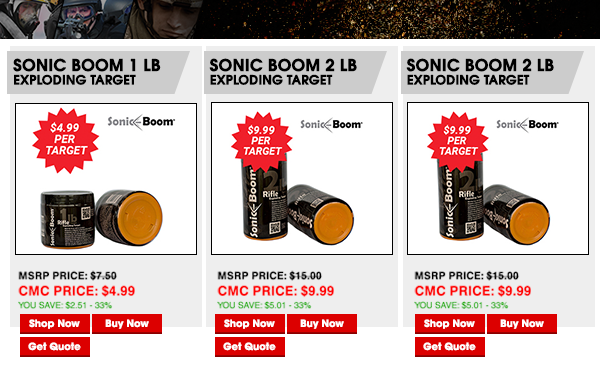
<style>
.page{position:relative;width:600px;height:367px;background:#ffffff}
.page>*{position:absolute;margin:0}
.t1{font:16.1px "AvantGardeCE-Demi";letter-spacing:0.005em;color:#000000;font-weight:bold}
.t2{font:12.6px "AvantGardeCE-Demi";letter-spacing:0.005em;color:#000000;font-weight:bold}
.t3{font:8.7px/12.7px "Helvetica";letter-spacing:0.005em;color:#19ae00}
.t4{font:10.6px "HelveticaGreek-Bold";letter-spacing:0.005em;color:#000000}
.t5{font:13.5px "HelveticaGreek-Bold";letter-spacing:0.005em;color:#ff0000}
.t6{font:13.5px/12.7px "HelveticaGreek-Bold";letter-spacing:0.005em;color:#ff0000}
.t7{font:9.8px "AvantGardeLT-Bold";color:#ffffff}
</style>
<div class="page">
<p class="t1" style="left:13px;top:58px;width:148px;height:14px">SONIC BOOM 1 LB</p>
<p class="t1" style="left:209px;top:58px;width:148px;height:14px">SONIC BOOM 2 LB</p>
<p class="t1" style="left:406px;top:58px;width:148px;height:14px">SONIC BOOM 2 LB</p>
<p class="t2" style="left:14px;top:74px;width:122px;height:11px">EXPLODING TARGET</p>
<p class="t2" style="left:210px;top:74px;width:123px;height:11px">EXPLODING TARGET</p>
<p class="t2" style="left:407px;top:74px;width:123px;height:11px">EXPLODING TARGET</p>
<p class="t3" style="left:18px;top:270px;width:117px;height:39px"><span class="t4">MSRP PRICE: $7.50<br></span><span class="t5">CMC PRICE: $4</span><span class="t6">.99<br></span>YOU SAVE: $2.51 - 33%</p>
<p class="t3" style="left:217px;top:270px;width:117px;height:39px"><span class="t4">MSRP PRICE: $15.00<br></span><span class="t5">CMC PRICE: </span><span class="t6">$9.99<br></span>YOU SAVE: $5.01 - 33%</p>
<p class="t3" style="left:414px;top:270px;width:117px;height:39px"><span class="t4">MSRP PRICE: $15.00<br></span><span class="t5">CMC PRICE: </span><span class="t6">$9.99<br></span>YOU SAVE: $5.01 - 33%</p>
<p class="t7" style="left:29px;top:319px;width:51px;height:10px">Shop Now</p>
<p class="t7" style="left:105px;top:319px;width:44px;height:10px">Buy Now</p>
<p class="t7" style="left:224px;top:319px;width:51px;height:10px">Shop Now</p>
<p class="t7" style="left:300px;top:319px;width:44px;height:10px">Buy Now</p>
<p class="t7" style="left:424px;top:319px;width:51px;height:10px">Shop Now</p>
<p class="t7" style="left:500px;top:319px;width:44px;height:10px">Buy Now</p>
<p class="t7" style="left:28px;top:342px;width:53px;height:9px">Get Quote</p>
<p class="t7" style="left:223px;top:342px;width:53px;height:9px">Get Quote</p>
<p class="t7" style="left:423px;top:342px;width:53px;height:9px">Get Quote</p>
</div>
